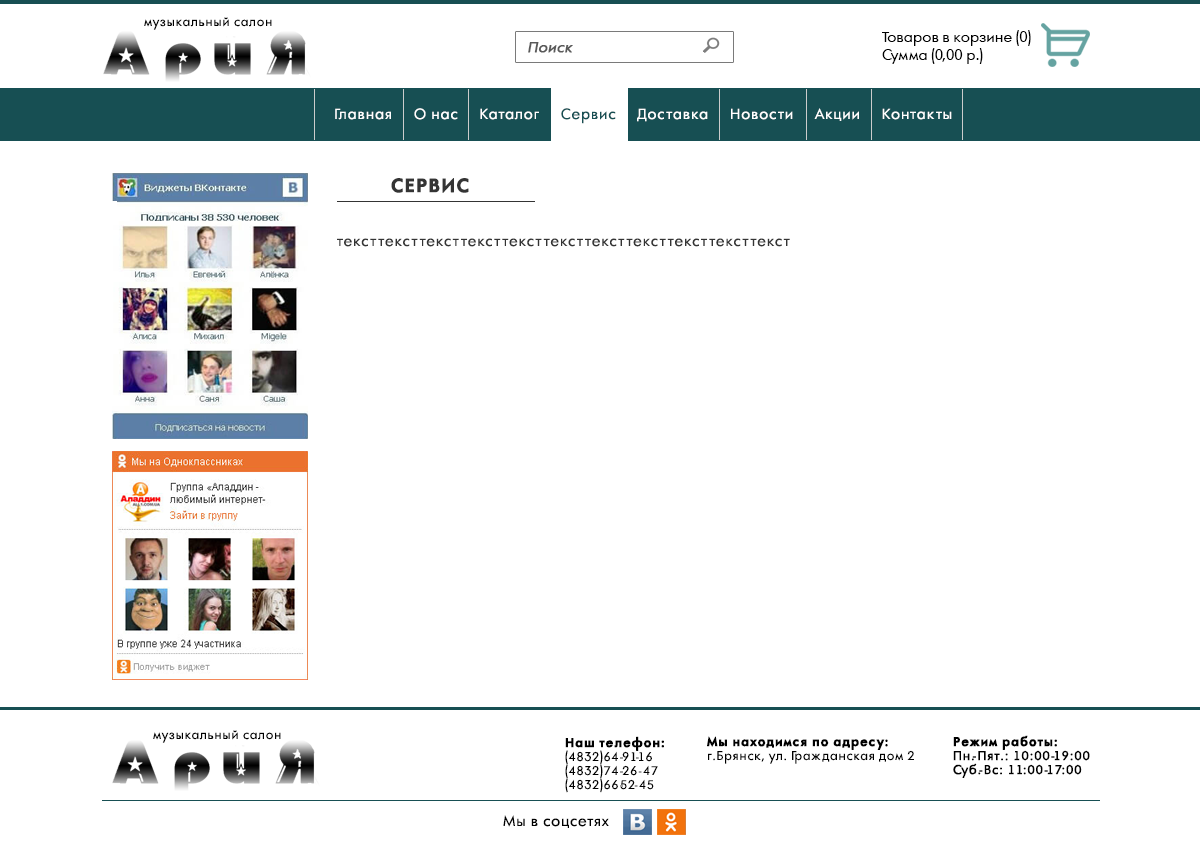
<style>
.page{position:relative;width:1200px;height:847px;background:#ffffff}
.page>*{position:absolute;margin:0}
.t1{font:12px "AFuturaOrto";letter-spacing:0.05em;color:#000000}
.t2{font:14px/18px "AFuturaOrto";color:#000000}
.t3{font:14px "AFuturaOrto";color:#595959;font-weight:bold;font-style:italic}
.t4{font:14px "AFuturaOrto";letter-spacing:0.05em;color:#ffffff}
.t5{font:14px "AFuturaOrto";letter-spacing:0.05em;color:#174f53}
.t6{font:18px "AFuturaOrtoBold";letter-spacing:0.05em;color:#343434;font-weight:bold}
.t7{font:14px "AFuturaOrto";letter-spacing:0.05em;color:#343434}
.t8{font:12px/14px "AFuturaOrto";letter-spacing:0.05em;color:#000000}
.t9{font:12px/14px "AFuturaOrtoBold";letter-spacing:0.05em;color:#000000;font-weight:bold}
.t10{font:12px/14px "AFuturaOrto";letter-spacing:0.05em;color:#000000;font-weight:bold}
.t11{font:14px "AFuturaOrto";letter-spacing:0.05em;color:#000000}
</style>
<div class="page">
<p class="t1" style="left:144px;top:17px;width:128px;height:13px">музыкальный салон</p>
<p class="t2" style="left:882px;top:30px;width:149px;height:34px">Товаров в корзине (0)<br>Сумма (0,00 р.)</p>
<p class="t3" style="left:528px;top:42px;width:45px;height:11px">Поиск</p>
<p class="t4" style="left:335px;top:108px;width:617px;height:16px">Главная     О нас     Каталог     <span class="t5">Сервис </span>    Доставка     Новости     Акции     Контакты</p>
<p class="t6" style="left:391px;top:178px;width:78px;height:15px">СЕРВИС</p>
<p class="t7" style="left:337px;top:238px;width:453px;height:9px">тексттексттексттексттексттексттексттексттексттексттекст</p>
<p class="t1" style="left:153px;top:730px;width:128px;height:13px">музыкальный салон</p>
<p class="t8" style="left:565px;top:736px;width:99px;height:57px"><span class="t9">Наш телефон:<br></span>(4832)64-91-16<br>(4832)74-26-47 <br>(4832)66-52-45</p>
<p class="t8" style="left:707px;top:736px;width:207px;height:28px"><span class="t9">Мы находимся по адресу:<br></span>г.Брянск, ул. Гражданская дом 2</p>
<p class="t10" style="left:953px;top:735px;width:137px;height:43px"><span class="t9">Режим работы:<br></span>Пн.-Пят.: 10:00-19:00<br>Суб.-Вс: 11:00-17:00</p>
<p class="t11" style="left:503px;top:815px;width:106px;height:13px">Мы в соцсетях</p>
</div>
